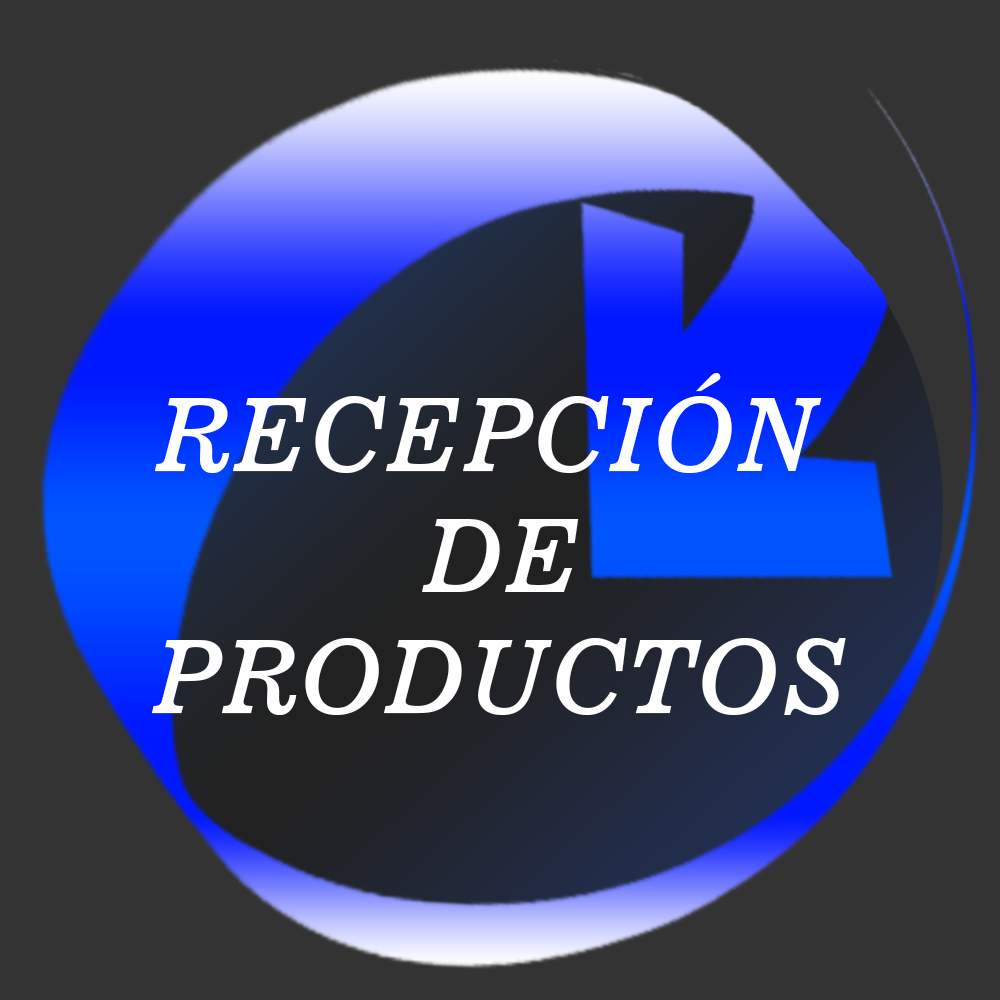
<style>
.page{position:relative;width:1000px;height:1000px;background:#333333}
.page>*{position:absolute;margin:0}
.t1{font:101.1px "News701BT-ItalicA";color:#ffffff}
</style>
<div class="page">
<p class="t1" style="left:152px;top:373px;width:694px;height:342px;text-align:center">RECEPCIÓN <br>DE<br>PRODUCTOS</p>
</div>
